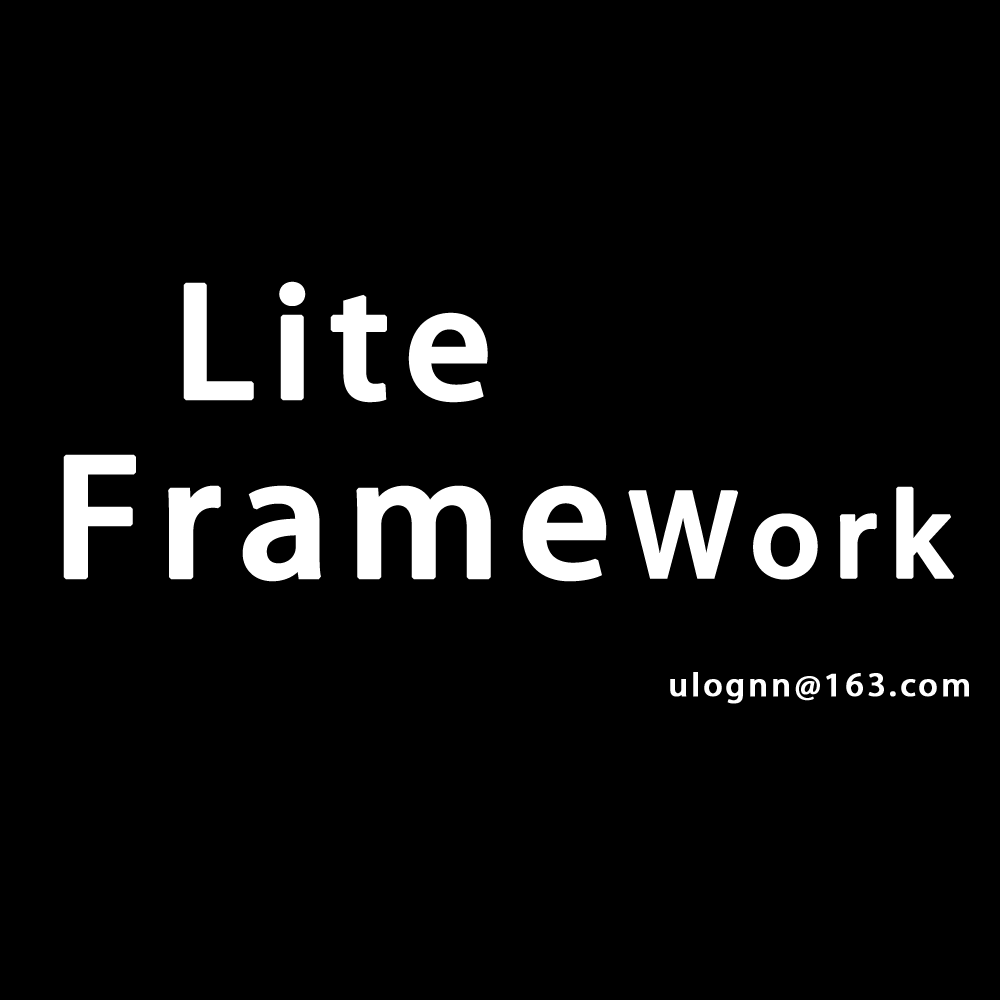
<style>
.page{position:relative;width:1000px;height:1000px;background:#000000}
.page>*{position:absolute;margin:0}
.t1{font:147.6px "AdobeHeitiStd-Regular";letter-spacing:0.075em;color:#ffffff;font-weight:bold;scale:1.08 1}
.t2{font:157.2px "AdobeHeitiStd-Regular";letter-spacing:0.075em;color:#ffffff;font-weight:bold;scale:1.08 1}
.t3{font:110.4px "AdobeHeitiStd-Regular";letter-spacing:0.075em;color:#ffffff;font-weight:bold;scale:1.08 1}
.t4{font:30px "AdobeHeitiStd-Regular";letter-spacing:0.075em;color:#ffffff;font-weight:bold;scale:1.08 1}
</style>
<div class="page">
<p class="t1" style="left:183px;top:281px;width:305px;height:122px">Lite</p>
<p class="t2" style="left:63px;top:454px;width:892px;height:128px">Frame<span class="t3">Work</span></p>
<p class="t4" style="left:670px;top:672px;width:299px;height:32px">ulognn@163.com</p>
</div>
